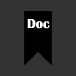
<style>
.page{position:relative;width:76px;height:76px;background:#333333}
.page>*{position:absolute;margin:0}
.t1{font:13.3px "BritannicBold";color:#ffffff}
</style>
<div class="page">
<p class="t1" style="left:27px;top:19px;width:23px;height:10px">Doc</p>
</div>
